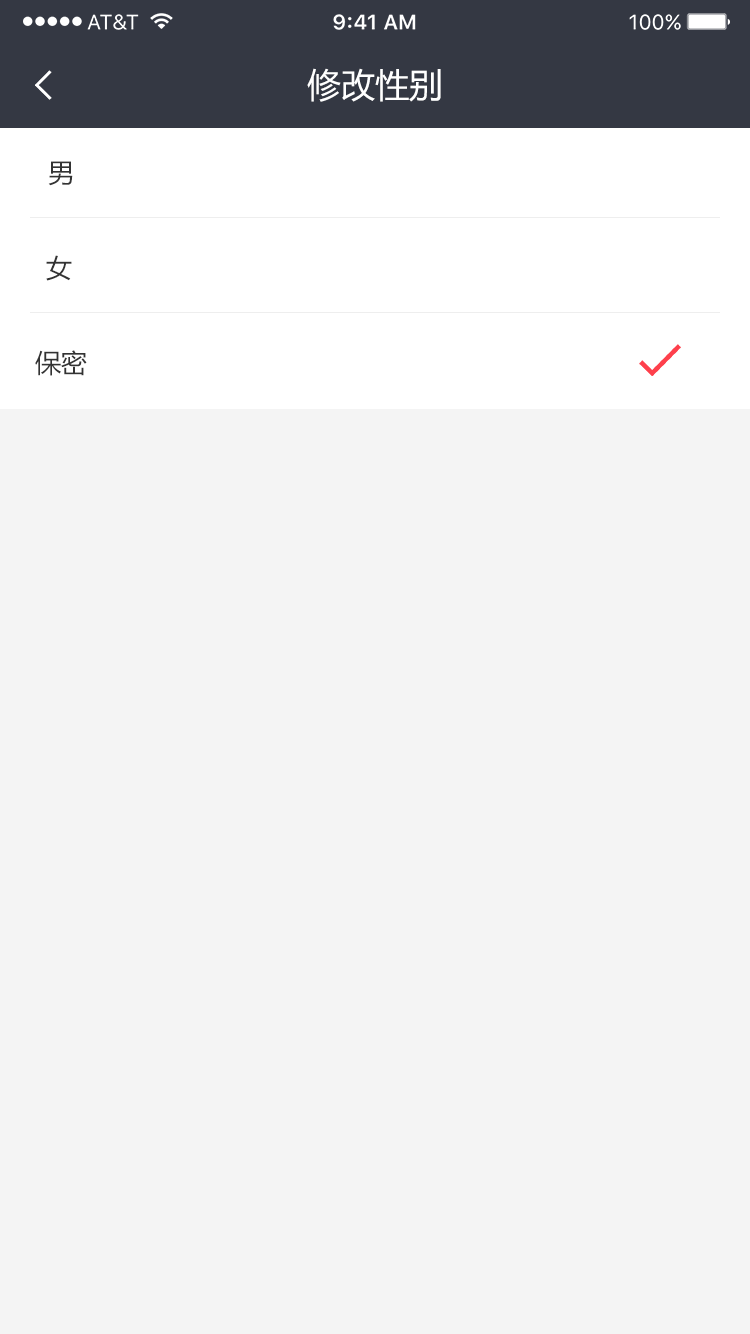
<style>
.page{position:relative;width:750px;height:1334px;background:#f4f4f4}
.page>*{position:absolute;margin:0}
.t1{font:34px "MicrosoftYaHei";color:#ffffff}
.t2{font:26px "MicrosoftYaHei";color:#333333}
</style>
<div class="page">
<p class="t1" style="left:307px;top:68px;width:134px;height:34px">修改性别</p>
<p class="t2" style="left:48px;top:161px;width:25px;height:25px">男</p>
<p class="t2" style="left:46px;top:255px;width:26px;height:26px">女</p>
<p class="t2" style="left:35px;top:350px;width:52px;height:26px">保密</p>
</div>
